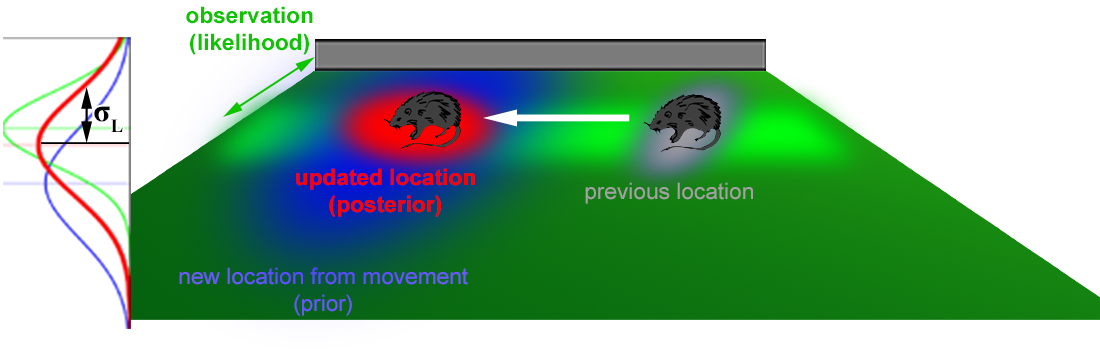
<style>
.page{position:relative;width:1100px;height:360px;background:#ffffff}
.page>*{position:absolute;margin:0}
.t1{font:22.7px "Arial-BoldMT";color:#0ec300}
.t2{font:32px "TimesNewRomanPS-BoldMT";color:#000000}
.t3{font:22.7px "Arial-BoldMT";color:#ff0000}
.t4{font:22.7px "ArialMT";color:#a2a2a2}
.t5{font:22.7px "ArialMT";color:#6e5bff}
</style>
<div class="page">
<p class="t1" style="left:186px;top:6px;width:127px;height:49px;text-align:center">observation<br>(likelihood)</p>
<p class="t2" style="left:94px;top:106px;width:29px;height:26px">σL</p>
<p class="t3" style="left:296px;top:168px;width:179px;height:49px;text-align:center">updated location<br>(posterior)</p>
<p class="t4" style="left:585px;top:182px;width:168px;height:22px">previous location</p>
<p class="t5" style="left:179px;top:267px;width:289px;height:49px;text-align:center">new location from movement<br>(prior)</p>
</div>
